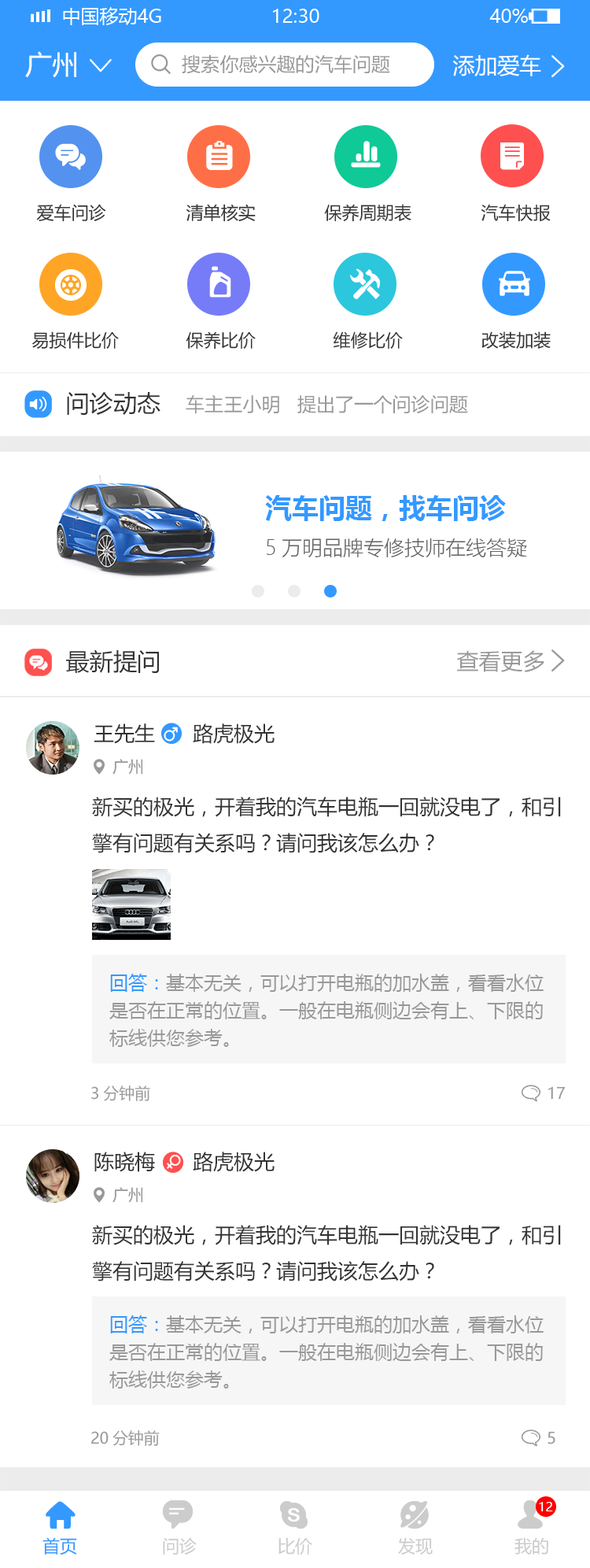
<style>
.page{position:relative;width:590px;height:1568px;background:#ffffff}
.page>*{position:absolute;margin:0}
.t1{font:26.8px "MicrosoftYaHei";color:#ffffff}
.t2{font:18.9px "MicrosoftYaHei";color:#999999}
.t3{font:22px "MicrosoftYaHei";color:#ffffff}
.t4{font:17.3px "MicrosoftYaHei";color:#333333}
.t5{font:23.6px "MicrosoftYaHei";color:#333333}
.t6{font:26.8px "MicrosoftYaHei-Bold";color:#3399ff}
.t7{font:20.5px "MicrosoftYaHeiLight";color:#666666}
.t8{font:22px "MicrosoftYaHei";color:#999999}
.t9{font:20.5px "MicrosoftYaHei";color:#333333}
.t10{font:15.7px "MicrosoftYaHei";color:#999999}
.t11{font:18.9px/27.6px "MicrosoftYaHei";color:#999999}
.t12{font:18.9px/27.6px "MicrosoftYaHei";color:#3399ff}
.t13{font:12.6px "MicrosoftYaHei";color:#ffffff}
.t14{font:17.3px "MicrosoftYaHei";color:#3399ff}
.t15{font:17.3px "MicrosoftYaHei";color:#cccccc}
</style>
<div class="page">
<p class="t1" style="left:25px;top:51px;width:51px;height:27px">广州</p>
<p class="t2" style="left:182px;top:55px;width:208px;height:19px">搜索你感兴趣的汽车问题</p>
<p class="t3" style="left:453px;top:54px;width:89px;height:22px">添加爱车</p>
<p class="t4" style="left:36px;top:204px;width:70px;height:18px">爱车问诊</p>
<p class="t4" style="left:186px;top:204px;width:70px;height:18px">清单核实</p>
<p class="t4" style="left:324px;top:204px;width:88px;height:18px">保养周期表</p>
<p class="t4" style="left:481px;top:204px;width:70px;height:18px">汽车快报</p>
<p class="t4" style="left:32px;top:331px;width:87px;height:18px">易损件比价</p>
<p class="t4" style="left:186px;top:331px;width:70px;height:18px">保养比价</p>
<p class="t4" style="left:333px;top:331px;width:70px;height:18px">维修比价</p>
<p class="t4" style="left:482px;top:331px;width:69px;height:18px">改装加装</p>
<p class="t5" style="left:67px;top:392px;width:94px;height:23px">问诊动态</p>
<p class="t2" style="left:186px;top:395px;width:282px;height:19px">车主王小明   提出了一个问诊问题</p>
<p class="t6" style="left:265px;top:495px;width:241px;height:26px">汽车问题，找车问诊</p>
<p class="t7" style="left:267px;top:538px;width:260px;height:19px">5万明品牌专修技师在线答疑</p>
<p class="t5" style="left:66px;top:649px;width:93px;height:24px">最新提问</p>
<p class="t8" style="left:457px;top:650px;width:88px;height:22px">查看更多</p>
<p class="t9" style="left:94px;top:723px;width:61px;height:21px">王先生</p>
<p class="t9" style="left:193px;top:723px;width:82px;height:21px">路虎极光</p>
<p class="t10" style="left:113px;top:759px;width:30px;height:16px">广州</p>
<p class="t9" style="left:92px;top:797px;width:469px;height:56px">新买的极光，开着我的汽车电瓶一回就没电了，和引<br>擎有问题有关系吗？请问我该怎么办？</p>
<p class="t11" style="left:109px;top:974px;width:435px;height:73px"><span class="t12">回答：</span>基本无关，可以打开电瓶的加水盖，看看水位<br>是否在正常的位置。一般在电瓶侧边会有上、下限的<br>标线供您参考。</p>
<p class="t10" style="left:91px;top:1085px;width:59px;height:16px">3分钟前</p>
<p class="t10" style="left:549px;top:1086px;width:17px;height:14px">17</p>
<p class="t9" style="left:94px;top:1152px;width:61px;height:20px">陈晓梅</p>
<p class="t9" style="left:193px;top:1152px;width:82px;height:20px">路虎极光</p>
<p class="t10" style="left:113px;top:1187px;width:30px;height:16px">广州</p>
<p class="t9" style="left:92px;top:1225px;width:469px;height:56px">新买的极光，开着我的汽车电瓶一回就没电了，和引<br>擎有问题有关系吗？请问我该怎么办？</p>
<p class="t11" style="left:109px;top:1315px;width:435px;height:74px"><span class="t12">回答：</span>基本无关，可以打开电瓶的加水盖，看看水位<br>是否在正常的位置。一般在电瓶侧边会有上、下限的<br>标线供您参考。</p>
<p class="t10" style="left:91px;top:1430px;width:68px;height:16px">20分钟前</p>
<p class="t10" style="left:548px;top:1431px;width:8px;height:13px">5</p>
<p class="t13" style="left:539px;top:1502px;width:14px;height:9px">12</p>
<p class="t14" style="left:43px;top:1537px;width:34px;height:18px">首页</p>
<p class="t15" style="left:163px;top:1537px;width:34px;height:18px">问诊</p>
<p class="t15" style="left:279px;top:1537px;width:33px;height:18px">比价</p>
<p class="t15" style="left:398px;top:1537px;width:35px;height:18px">发现</p>
<p class="t15" style="left:515px;top:1537px;width:34px;height:18px">我的</p>
</div>
